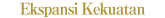
<style>
.page{position:relative;width:165px;height:18px;background:#ffffff}
.page>*{position:absolute;margin:0}
.t1{font:16px "RyuminPro-ExBold";letter-spacing:-0.08em;color:#af943f}
</style>
<div class="page">
<p class="t1" style="left:20px;top:2px;width:125px;height:15px">Ekspansi Kekuatan</p>
</div>
